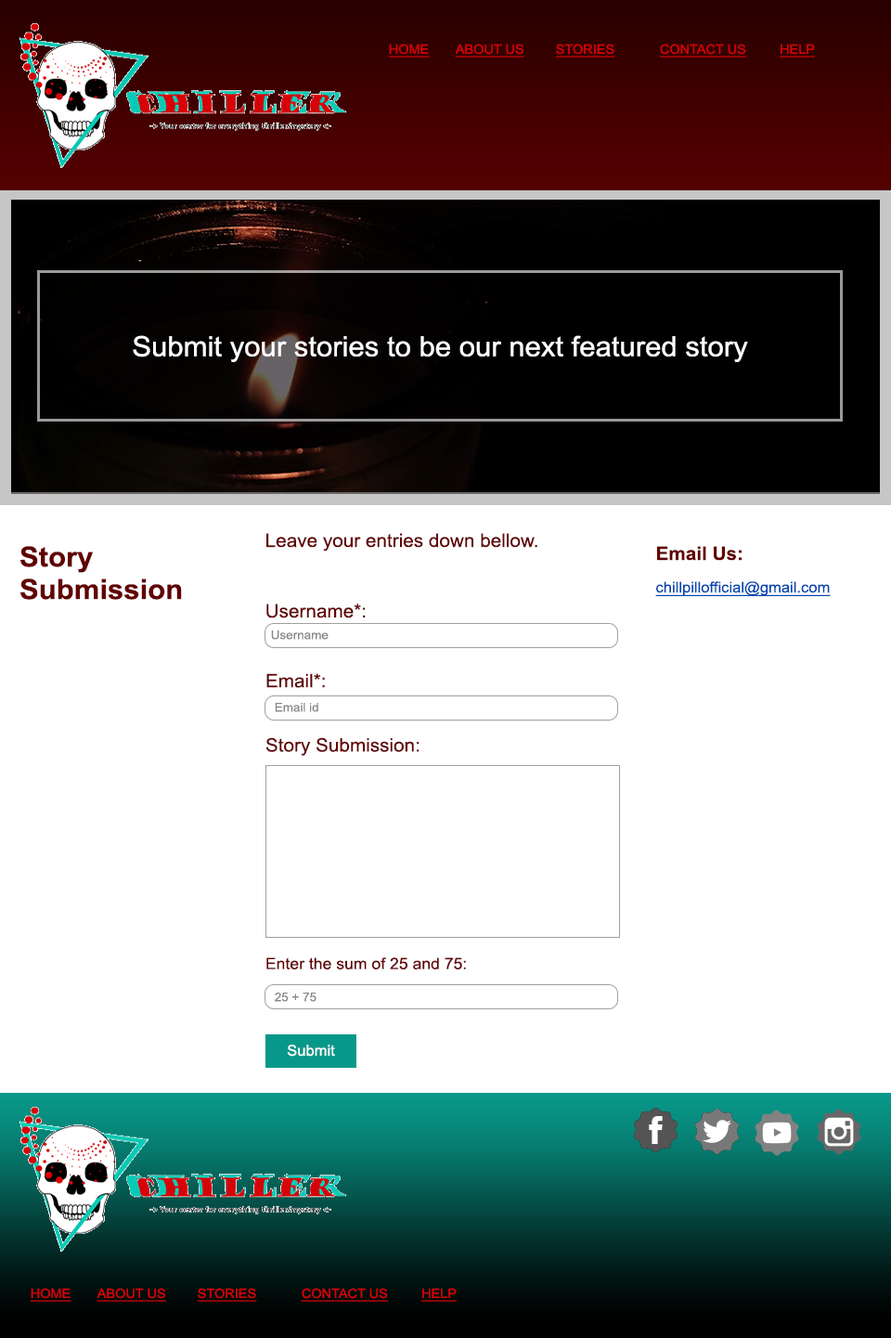
<style>
.page{position:relative;width:891px;height:1338px;background:#ffffff}
.page>*{position:absolute;margin:0}
.t1{font:13px "ArialMT";color:#d60208;text-decoration:underline;scale:1.04 1}
.t2{font:27.9px "ArialMT";color:#ffffff;scale:1.04 1}
.t3{font:18.6px "ArialMT";color:#620000;scale:1.04 1}
.t4{font:27.9px/32.5px "Arial-BoldMT";color:#620000;scale:1.04 1}
.t5{font:14.9px/32.5px "ArialMT";color:#0046b0;text-decoration:underline;scale:1.04 1}
.t6{font:18.6px/32.5px "Arial-BoldMT";color:#620000;scale:1.04 1}
.t7{font:12.1px "ArialMT";color:#878787;scale:1.04 1}
.t8{font:15.8px "ArialMT";color:#620000;scale:1.04 1}
.t9{font:14.9px "ArialMT";color:#ffffff;scale:1.04 1}
</style>
<div class="page">
<p class="t1" style="left:388px;top:44px;width:427px;height:14px">HOME ABOUT US STORIES CONTACT US         HELP</p>
<p class="t2" style="left:133px;top:335px;width:615px;height:27px">Submit your stories to be our next featured story</p>
<p class="t3" style="left:266px;top:533px;width:272px;height:18px">Leave your entries down bellow.</p>
<p class="t4" style="left:20px;top:546px;width:162px;height:54px">Story <br>Submission</p>
<p class="t5" style="left:655px;top:546px;width:176px;height:50px"><span class="t6">Email Us:<br></span>chillpillofficial@gmail.com</p>
<p class="t3" style="left:266px;top:603px;width:100px;height:15px">Username*:</p>
<p class="t7" style="left:271px;top:630px;width:58px;height:10px">Username</p>
<p class="t3" style="left:266px;top:673px;width:59px;height:15px">Email*:</p>
<p class="t7" style="left:275px;top:703px;width:43px;height:9px">Email id</p>
<p class="t3" style="left:266px;top:737px;width:154px;height:19px">Story Submission:</p>
<p class="t8" style="left:266px;top:957px;width:200px;height:12px">Enter the sum of 25 and 75:</p>
<p class="t7" style="left:275px;top:992px;width:42px;height:10px">25 + 75</p>
<p class="t9" style="left:287px;top:1044px;width:48px;height:13px">Submit</p>
<p class="t1" style="left:30px;top:1288px;width:427px;height:14px">HOME ABOUT US STORIES CONTACT US         HELP</p>
</div>
